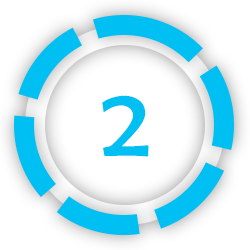
<style>
.page{position:relative;width:250px;height:250px;background:#ffffff}
.page>*{position:absolute;margin:0}
.t1{font:100px "BerlinSansFB-Reg";color:#00bff3}
</style>
<div class="page">
<p class="t1" style="left:102px;top:95px;width:47px;height:62px">2</p>
</div>
